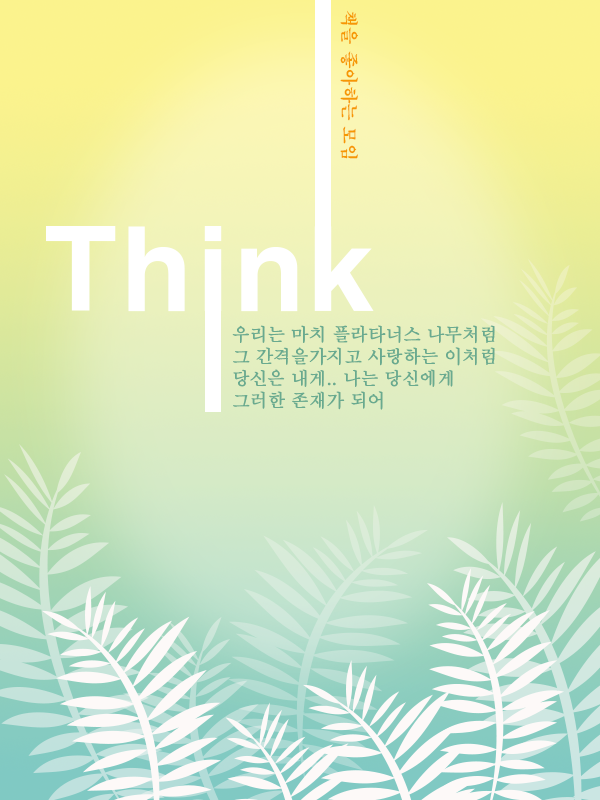
<style>
.page{position:relative;width:600px;height:800px}
.page>*{position:absolute;margin:0}
.t1{font:17.9px "H2mjrE";letter-spacing:-0.015em;color:#f69802}
.t2{font:110.2px "H2gtrE";letter-spacing:-0.015em;color:#ffffff}
.t3{font:18px/22px "AdobeMyungjoStd-Medium";letter-spacing:-0.015em;color:#69aa8f;font-weight:bold;scale:0.97 1}
</style>
<div class="page">
<p class="t1" style="left:340px;top:10px;width:18px;height:149px;rotate:90deg">책을 좋아하는 모임</p>
<p class="t2" style="left:46px;top:226px;width:328px;height:86px">Think</p>
<p class="t3" style="left:232px;top:325px;width:263px;height:85px">우리는 마치 플라타너스 나무처럼<br>그 간격을가지고 사랑하는 이처럼<br>당신은 내게.. 나는 당신에게<br>그러한 존재가 되어</p>
</div>
